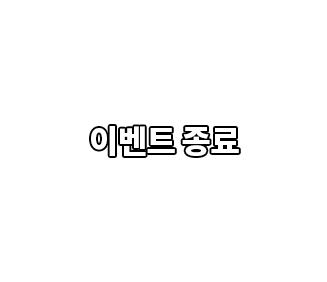
<style>
.page{position:relative;width:327px;height:282px;background:#ffffff}
.page>*{position:absolute;margin:0}
.t1{font:31.8px "NotoSansCJKkr-Black";letter-spacing:-0.02em;color:#ffffff}
</style>
<div class="page">
<p class="t1" style="left:91px;top:126px;width:148px;height:30px">이벤트 종료</p>
</div>
